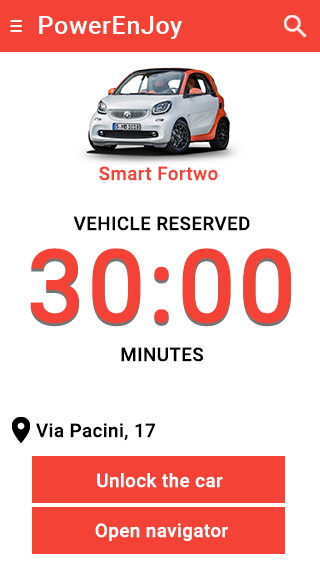
<style>
.page{position:relative;width:320px;height:570px;background:#ffffff}
.page>*{position:absolute;margin:0}
.t1{font:25px "Roboto-Medium";letter-spacing:0.025em;color:#ffffff}
.t2{font:18.8px "Roboto-Medium";letter-spacing:0.025em;color:#f44336}
.t3{font:18.8px "Roboto-Medium";letter-spacing:0.025em;color:#000000}
.t4{font:102.1px "Roboto-Medium";letter-spacing:0.025em;color:#f44336}
.t5{font:18.8px "Roboto-Medium";letter-spacing:0.025em;color:#ffffff}
</style>
<div class="page">
<p class="t1" style="left:39px;top:16px;width:143px;height:23px">PowerEnJoy</p>
<p class="t2" style="left:99px;top:166px;width:119px;height:15px">Smart Fortwo</p>
<p class="t3" style="left:73px;top:216px;width:177px;height:15px">VEHICLE RESERVED</p>
<p class="t4" style="left:30px;top:248px;width:261px;height:76px">30:00</p>
<p class="t3" style="left:121px;top:347px;width:82px;height:15px">MINUTES</p>
<p class="t3" style="left:36px;top:423px;width:119px;height:18px">Via Pacini, 17</p>
<p class="t5" style="left:97px;top:473px;width:126px;height:15px">Unlock the car</p>
<p class="t5" style="left:95px;top:523px;width:133px;height:18px">Open navigator</p>
</div>
